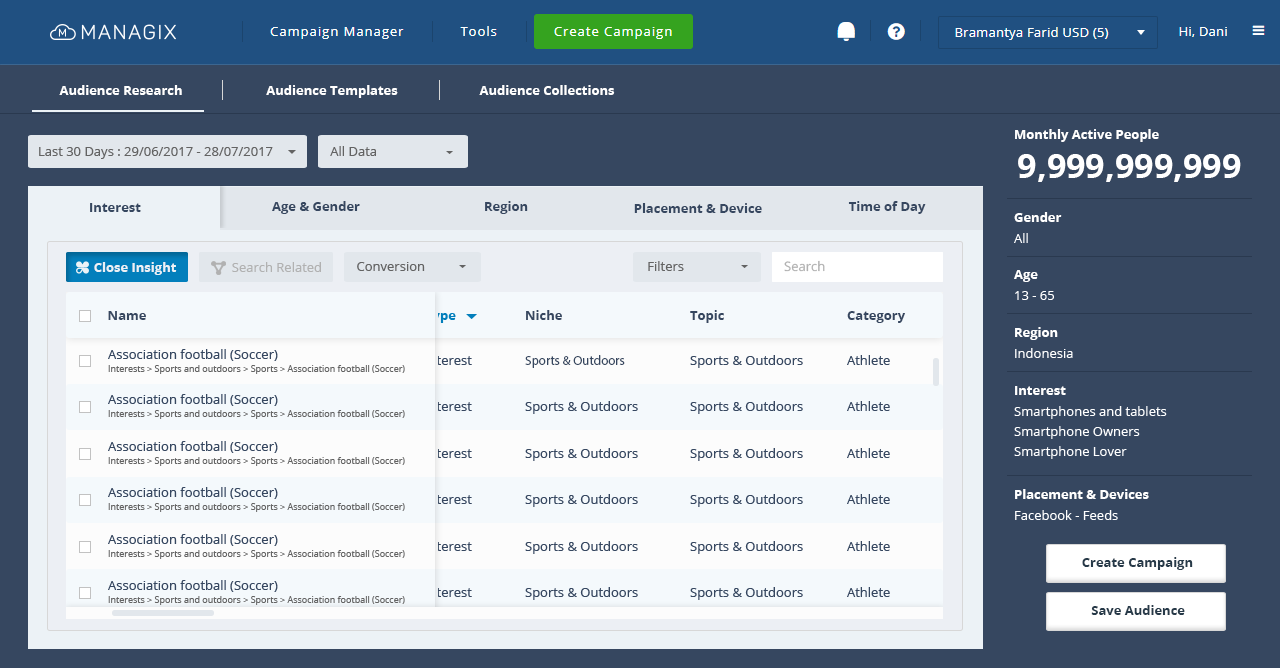
<style>
.page{position:relative;width:1280px;height:668px;background:#364760}
.page>*{position:absolute;margin:0}
.t1{font:13px "OpenSans-Bold";color:#ffffff}
.t2{font:13px "OpenSans";color:#636363}
.t3{font:34px "OpenSans-Bold";color:#ffffff}
.t4{font:13px "OpenSans-Bold";color:#364760}
.t5{font:13px "OpenSans";color:#ffffff}
.t6{font:13px "OpenSans-Bold";color:#ecf2f6}
.t7{font:13px "OpenSans";color:#b1b1b1}
.t8{font:13px "OpenSans";color:#364760}
.t9{font:9px "OpenSans";color:#636363}
.t10{font:13px "MyriadPro-Regular";color:#364760}
.t11{font:13px "OpenSans-Bold";color:#273a49}
</style>
<div class="page">
<p class="t1" style="left:59px;top:85px;width:123px;height:10px">Audience Research</p>
<p class="t1" style="left:266px;top:85px;width:132px;height:13px">Audience Templates</p>
<p class="t1" style="left:479px;top:85px;width:136px;height:10px">Audience Collections</p>
<p class="t1" style="left:1015px;top:129px;width:144px;height:13px">Monthly Active People</p>
<p class="t2" style="left:39px;top:147px;width:234px;height:12px">Last 30 Days : 29/06/2017 - 28/07/2017</p>
<p class="t2" style="left:330px;top:146px;width:46px;height:10px">All Data</p>
<p class="t3" style="left:1018px;top:154px;width:223px;height:28px">9,999,999,999</p>
<p class="t4" style="left:90px;top:203px;width:51px;height:9px">Interest</p>
<p class="t4" style="left:272px;top:201px;width:88px;height:13px">Age &amp; Gender</p>
<p class="t4" style="left:485px;top:201px;width:43px;height:13px">Region</p>
<p class="t4" style="left:634px;top:203px;width:128px;height:10px">Placement &amp; Device</p>
<p class="t4" style="left:848px;top:201px;width:78px;height:13px">Time of Day</p>
<p class="t1" style="left:1014px;top:212px;width:48px;height:10px">Gender</p>
<p class="t5" style="left:1014px;top:233px;width:14px;height:10px">All</p>
<p class="t6" style="left:94px;top:262px;width:83px;height:13px">Close Insight</p>
<p class="t7" style="left:232px;top:262px;width:89px;height:10px">Search Related</p>
<p class="t2" style="left:357px;top:262px;width:68px;height:9px">Conversion</p>
<p class="t2" style="left:648px;top:261px;width:36px;height:10px">Filters</p>
<p class="t7" style="left:784px;top:260px;width:41px;height:12px">Search</p>
<p class="t1" style="left:1014px;top:270px;width:24px;height:12px">Age</p>
<p class="t5" style="left:1015px;top:291px;width:39px;height:9px">13 - 65</p>
<p class="t4" style="left:108px;top:311px;width:38px;height:9px">Name</p>
<p class="t4" style="left:526px;top:310px;width:36px;height:10px">Niche</p>
<p class="t4" style="left:690px;top:310px;width:34px;height:13px">Topic</p>
<p class="t4" style="left:847px;top:311px;width:58px;height:12px">Category</p>
<p class="t1" style="left:1015px;top:327px;width:43px;height:13px">Region</p>
<p class="t8" style="left:108px;top:349px;width:170px;height:12px">Association football (Soccer)</p>
<p class="t5" style="left:1015px;top:348px;width:58px;height:10px">Indonesia</p>
<p class="t9" style="left:108px;top:365px;width:297px;height:9px">Interests &gt; Sports and outdoors &gt; Sports &gt; Association football (Soccer)</p>
<p class="t10" style="left:525px;top:355px;width:100px;height:13px">Sports &amp; Outdoors</p>
<p class="t8" style="left:690px;top:355px;width:113px;height:13px">Sports &amp; Outdoors</p>
<p class="t8" style="left:847px;top:355px;width:43px;height:10px">Athlete</p>
<p class="t1" style="left:1015px;top:386px;width:51px;height:9px">Interest</p>
<p class="t8" style="left:108px;top:394px;width:170px;height:12px">Association football (Soccer)</p>
<p class="t8" style="left:525px;top:401px;width:113px;height:13px">Sports &amp; Outdoors</p>
<p class="t8" style="left:690px;top:401px;width:113px;height:13px">Sports &amp; Outdoors</p>
<p class="t8" style="left:847px;top:401px;width:43px;height:10px">Athlete</p>
<p class="t9" style="left:108px;top:410px;width:297px;height:9px">Interests &gt; Sports and outdoors &gt; Sports &gt; Association football (Soccer)</p>
<p class="t5" style="left:1014px;top:406px;width:153px;height:13px">Smartphones and tablets</p>
<p class="t5" style="left:1014px;top:426px;width:126px;height:13px">Smartphone Owners</p>
<p class="t8" style="left:108px;top:441px;width:170px;height:12px">Association football (Soccer)</p>
<p class="t8" style="left:525px;top:448px;width:113px;height:13px">Sports &amp; Outdoors</p>
<p class="t8" style="left:690px;top:448px;width:113px;height:13px">Sports &amp; Outdoors</p>
<p class="t8" style="left:847px;top:448px;width:43px;height:10px">Athlete</p>
<p class="t5" style="left:1014px;top:446px;width:113px;height:13px">Smartphone Lover</p>
<p class="t9" style="left:108px;top:457px;width:297px;height:9px">Interests &gt; Sports and outdoors &gt; Sports &gt; Association football (Soccer)</p>
<p class="t8" style="left:108px;top:487px;width:170px;height:12px">Association football (Soccer)</p>
<p class="t8" style="left:525px;top:494px;width:113px;height:13px">Sports &amp; Outdoors</p>
<p class="t8" style="left:690px;top:494px;width:113px;height:13px">Sports &amp; Outdoors</p>
<p class="t8" style="left:847px;top:494px;width:43px;height:10px">Athlete</p>
<p class="t1" style="left:1015px;top:489px;width:134px;height:10px">Placement &amp; Devices</p>
<p class="t9" style="left:108px;top:503px;width:297px;height:9px">Interests &gt; Sports and outdoors &gt; Sports &gt; Association football (Soccer)</p>
<p class="t5" style="left:1015px;top:510px;width:103px;height:10px">Facebook - Feeds</p>
<p class="t8" style="left:108px;top:534px;width:170px;height:12px">Association football (Soccer)</p>
<p class="t8" style="left:525px;top:541px;width:113px;height:13px">Sports &amp; Outdoors</p>
<p class="t8" style="left:690px;top:541px;width:113px;height:13px">Sports &amp; Outdoors</p>
<p class="t8" style="left:847px;top:541px;width:43px;height:10px">Athlete</p>
<p class="t9" style="left:108px;top:550px;width:297px;height:9px">Interests &gt; Sports and outdoors &gt; Sports &gt; Association football (Soccer)</p>
<p class="t11" style="left:1082px;top:557px;width:111px;height:13px">Create Campaign</p>
<p class="t8" style="left:108px;top:580px;width:170px;height:12px">Association football (Soccer)</p>
<p class="t8" style="left:525px;top:587px;width:113px;height:13px">Sports &amp; Outdoors</p>
<p class="t8" style="left:690px;top:587px;width:113px;height:13px">Sports &amp; Outdoors</p>
<p class="t8" style="left:847px;top:587px;width:43px;height:10px">Athlete</p>
<p class="t9" style="left:108px;top:596px;width:297px;height:9px">Interests &gt; Sports and outdoors &gt; Sports &gt; Association football (Soccer)</p>
<p class="t11" style="left:1091px;top:605px;width:94px;height:10px">Save Audience</p>
</div>
